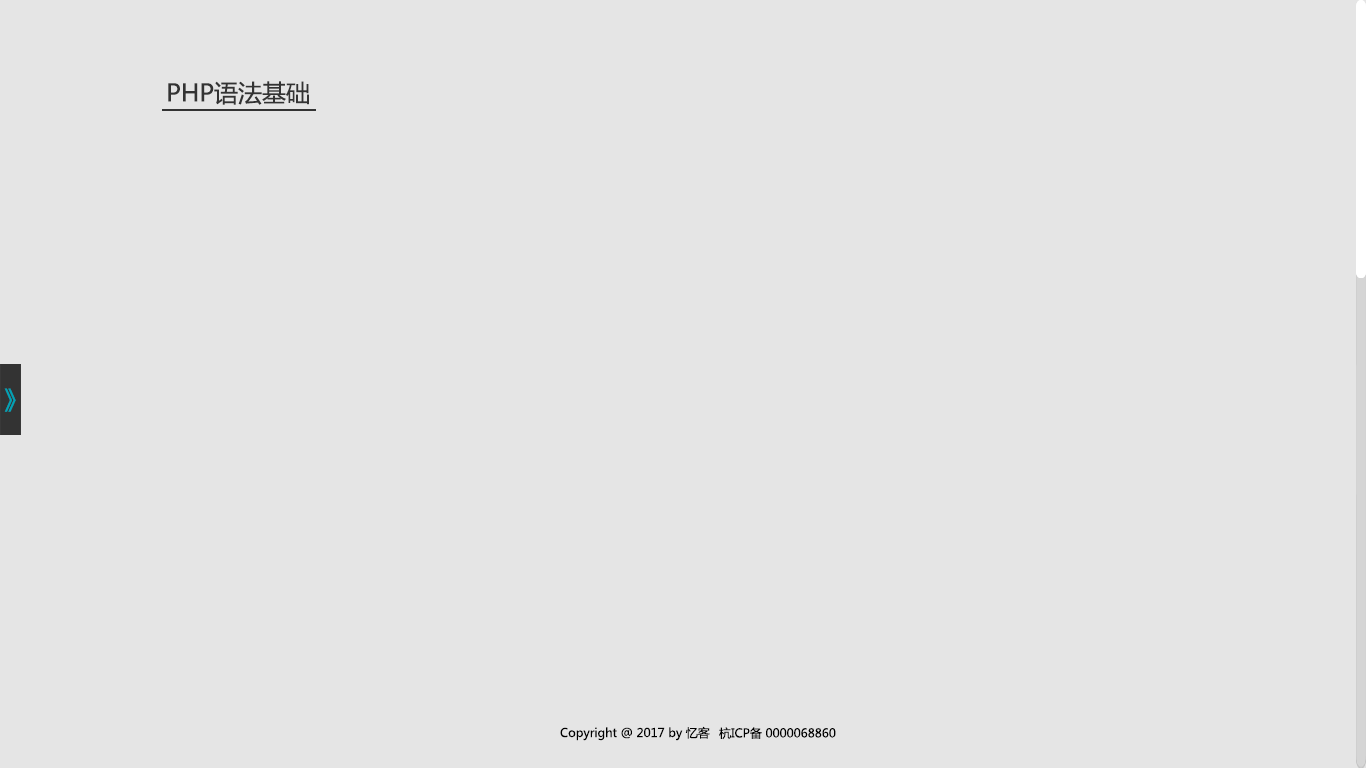
<style>
.page{position:relative;width:1366px;height:768px;background:#e5e5e5}
.page>*{position:absolute;margin:0}
.t1{font:24px "MicrosoftYaHei";color:#333333}
.t2{font:24px "MicrosoftYaHei";color:#02a2b5}
.t3{font:12px "MicrosoftYaHei";color:#000000}
</style>
<div class="page">
<p class="t1" style="left:168px;top:81px;width:141px;height:24px">PHP语法基础</p>
<p class="t2" style="left:4px;top:388px;width:12px;height:24px">》</p>
<p class="t3" style="left:560px;top:726px;width:150px;height:15px">Copyright @ 2017 by 忆客</p>
<p class="t3" style="left:719px;top:727px;width:117px;height:13px">杭ICP备 0000068860</p>
</div>
